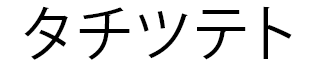
<style>
.page{position:relative;width:320px;height:64px;background:#ffffff}
.page>*{position:absolute;margin:0}
.t1{font:60px "KozGoPr6N-Regular";color:#000000}
</style>
<div class="page">
<p class="t1" style="left:24px;top:6px;width:268px;height:54px">タチツテト</p>
</div>
